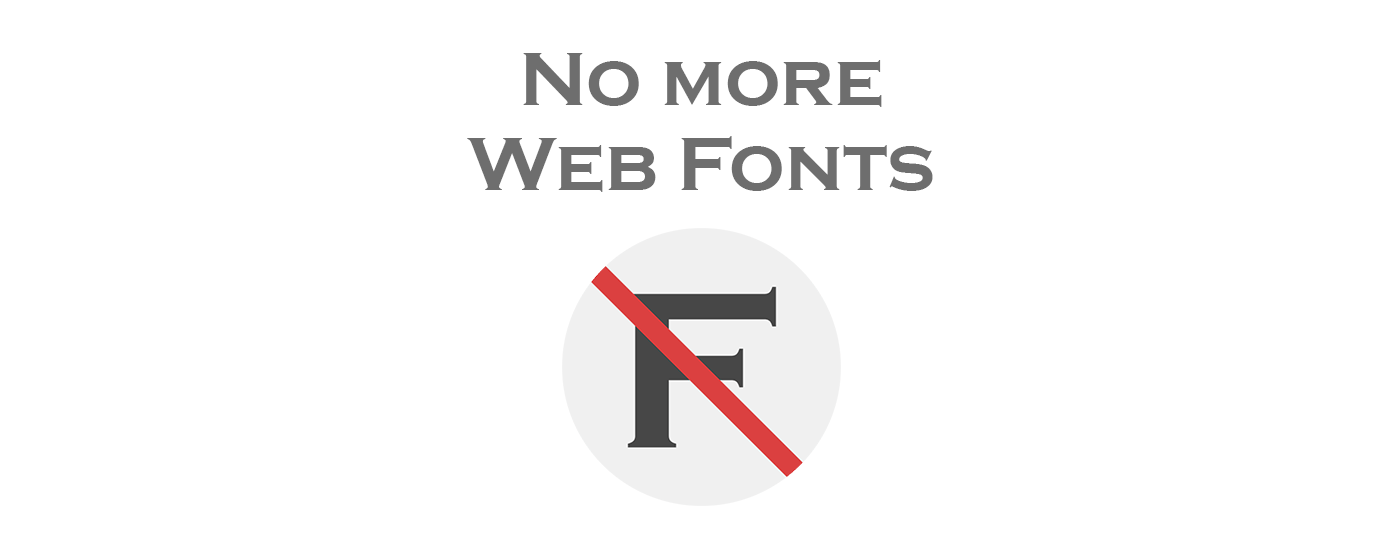
<style>
.page{position:relative;width:1400px;height:560px;background:#ffffff}
.page>*{position:absolute;margin:0}
.t1{font:77.7px/84.6px "CopperplateGothic-Bold";color:#6e6e6e}
</style>
<div class="page">
<p class="t1" style="left:467px;top:53px;width:466px;height:139px;text-align:center">No more<br>Web Fonts</p>
</div>
